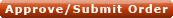
<style>
.page{position:relative;width:173px;height:18px}
.page>*{position:absolute;margin:0}
.t1{font:11px "Verdana-Bold";letter-spacing:0.1em;color:#ffffff}
</style>
<div class="page">
<p class="t1" style="left:5px;top:4px;width:163px;height:11px">Approve/Submit Order</p>
</div>
